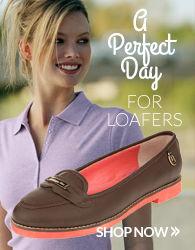
<style>
.page{position:relative;width:195px;height:250px}
.page>*{position:absolute;margin:0}
.t1{font:30px/24px "GrandHotel-Regular";letter-spacing:-0.008em;color:#ffffff}
.t2{font:18px/18px "Lato-Light";color:#ffffff;text-transform:uppercase}
.t3{font:13.8px "Lato-Bold";letter-spacing:-0.04em;color:#ffffff;text-transform:uppercase}
.t4{font:22.5px "Lato-Bold";letter-spacing:-0.26em;color:#ffffff;text-transform:uppercase;scale:0.51 1}
</style>
<div class="page">
<p class="t1" style="left:108px;top:8px;width:69px;height:83px;text-align:center">A<br>Perfect<br>Day</p>
<p class="t2" style="left:108px;top:95px;width:74px;height:32px;text-align:center">For<br>Loafers</p>
<p class="t3" style="left:96px;top:226px;width:84px;height:11px">shop now <span class="t4">&gt;&gt;</span></p>
</div>
